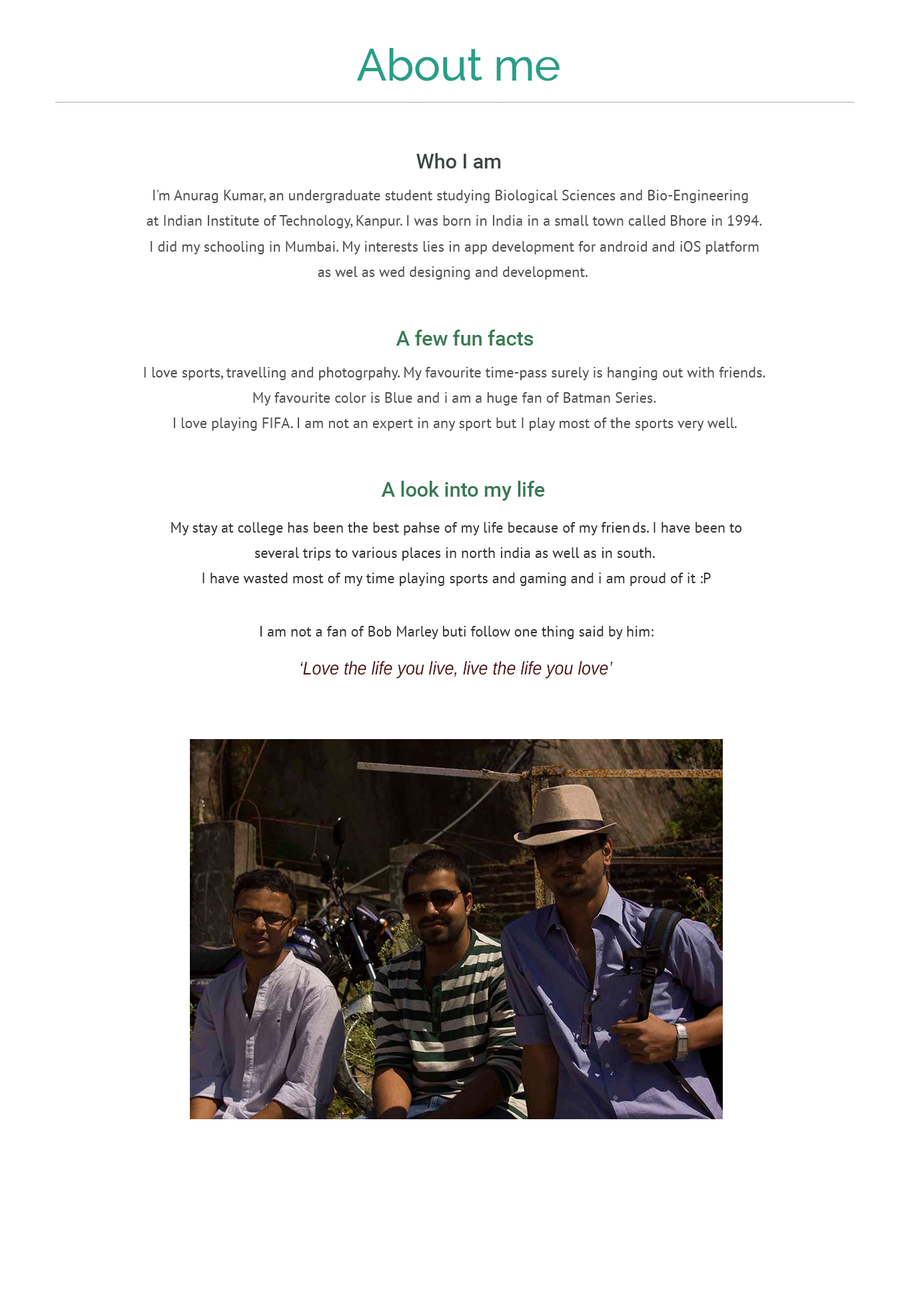
<style>
.page{position:relative;width:910px;height:1311px;background:#ffffff}
.page>*{position:absolute;margin:0}
.t1{font:44.4px "Raleway-Medium";color:#299f87}
.t2{font:20.3px "Roboto-Medium";color:#3f4545}
.t3{font:14.8px "PTSans-Regular";color:#524e4e}
.t4{font:20.3px "Roboto-Medium";color:#387a54}
.t5{font:14.8px "PTSans-Regular";color:#323030}
.t6{font:18.5px "Arimo-Italic";color:#501313;scale:0.9 1}
</style>
<div class="page">
<p class="t1" style="left:356px;top:48px;width:203px;height:33px">About me</p>
<p class="t2" style="left:416px;top:153px;width:85px;height:15px">Who I am</p>
<p class="t3" style="left:146px;top:190px;width:616px;height:90px;text-align:center">I'm Anurag Kumar, an undergraduate student studying Biological Sciences and Bio-Engineering  <br><br>at Indian Institute of Technology, Kanpur. I was born in India in a small town called Bhore in 1994.<br><br>I did my schooling in Mumbai. My interests lies in app development for android and iOS platform<br><br>as wel as wed designing and development.</p>
<p class="t4" style="left:396px;top:330px;width:137px;height:16px">A few fun facts</p>
<p class="t3" style="left:144px;top:367px;width:621px;height:64px;text-align:center">I love sports, travelling and photogrpahy. My favourite time-pass surely is hanging out with friends.<br><br>My favourite color is Blue and i am a huge fan of Batman Series.<br><br>I love playing FIFA. I am not an expert in any sport but I play most of the sports very well.</p>
<p class="t4" style="left:381px;top:481px;width:164px;height:20px">A look into my life</p>
<p class="t5" style="left:171px;top:522px;width:571px;height:117px;text-align:center">My stay at college has been the best pahse of my life because of my friends. I have been to<br><br>several trips to various places in north india as well as in south. <br><br>I have wasted most of my time playing sports and gaming and i am proud of it :P<br><br><br>I am not a fan of Bob Marley buti follow one thing said by him:</p>
<p class="t6" style="left:300px;top:661px;width:313px;height:17px">‘Love the life you live, live the life you love’</p>
</div>
